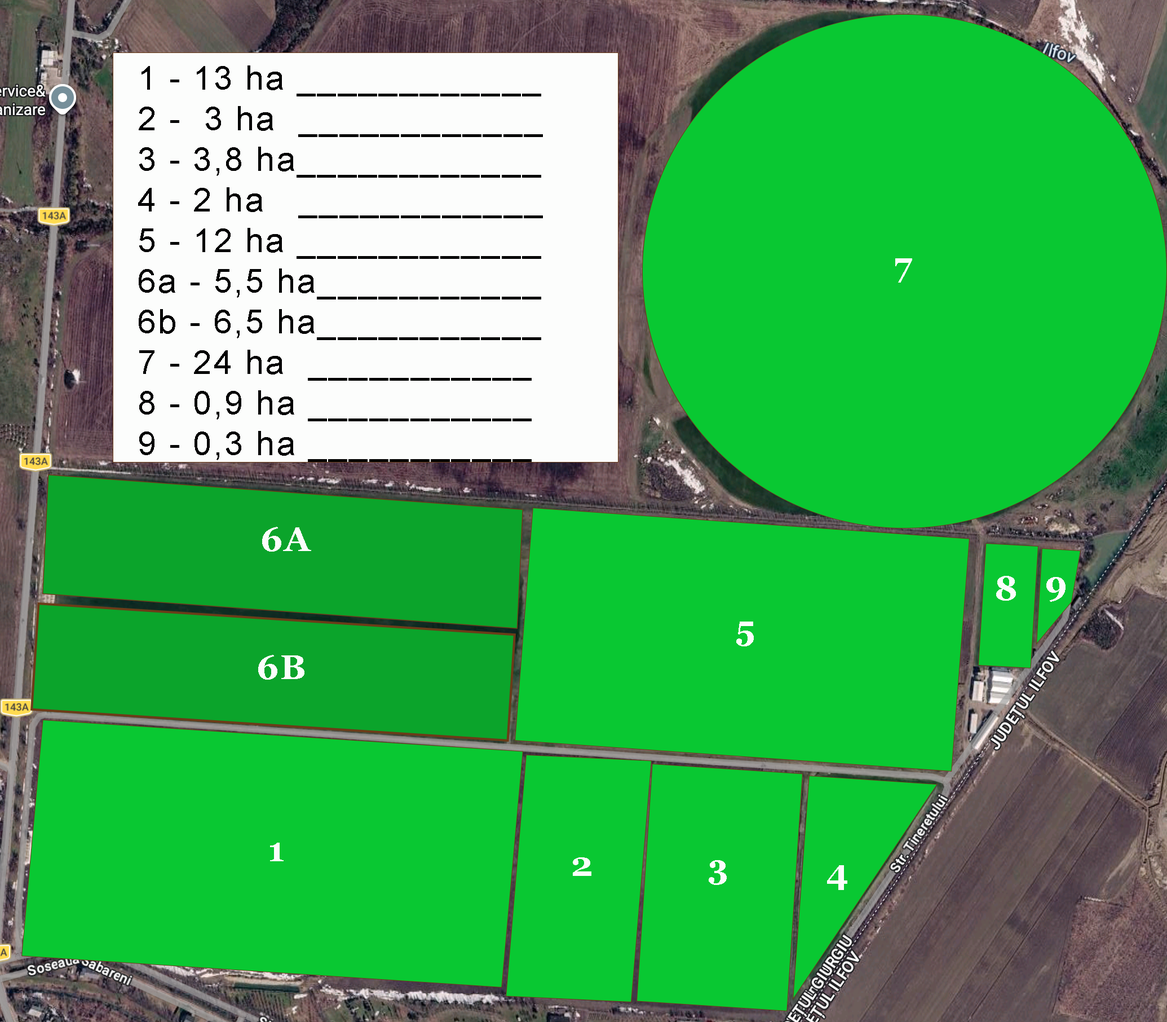
<style>
.page{position:relative;width:1167px;height:1022px;background:#09c832}
.page>*{position:absolute;margin:0}
.t1{font:33.8px "ArialMT";letter-spacing:0.05em;color:#000000}
.t2{font:33.8px "Georgia-Bold";letter-spacing:0.05em;color:#fcfdfc}
</style>
<div class="page">
<p class="t1" style="left:138px;top:65px;width:405px;height:397px">1 - 13 ha ____________<br>2 -  3 ha  ____________<br>3 - 3,8 ha____________<br>4 - 2 ha   ____________<br>5 - 12 ha ____________<br>6a - 5,5 ha___________<br>6b - 6,5 ha___________<br>7 - 24 ha  ___________<br>8 - 0,9 ha ___________<br>9 - 0,3 ha ___________</p>
<p class="t2" style="left:895px;top:258px;width:17px;height:24px">7</p>
<p class="t2" style="left:262px;top:527px;width:49px;height:24px">6A</p>
<p class="t2" style="left:996px;top:576px;width:20px;height:24px">8</p>
<p class="t2" style="left:1046px;top:577px;width:20px;height:25px">9</p>
<p class="t2" style="left:736px;top:621px;width:18px;height:25px">5</p>
<p class="t2" style="left:258px;top:655px;width:46px;height:24px">6B</p>
<p class="t2" style="left:270px;top:842px;width:14px;height:19px">1</p>
<p class="t2" style="left:573px;top:857px;width:18px;height:19px">2</p>
<p class="t2" style="left:709px;top:860px;width:18px;height:25px">3</p>
<p class="t2" style="left:827px;top:865px;width:20px;height:25px">4</p>
</div>
